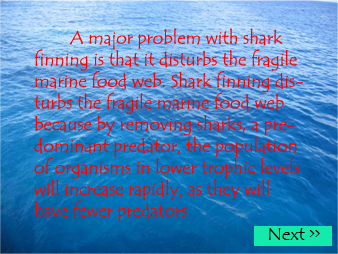
<style>
.page{position:relative;width:338px;height:254px}
.page>*{position:absolute;margin:0}
.t1{font:18px "TempusSansITC";color:#ff0000}
</style>
<div class="page">
<p class="t1" style="left:33px;top:28px;width:270px;height:194px">A major problem with shark finning is that it disturbs the fragile marine food web. Shark finning disturbs the fragile marine food web because by removing sharks, a predominant predator, the population of organisms in lower trophic levels will increase rapidly, as they will have fewer predators.</p>
</div>
